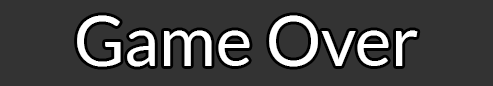
<style>
.page{position:relative;width:493px;height:86px;background:#333333}
.page>*{position:absolute;margin:0}
.t1{font:69.1px "Lato-Regular";color:#ffffff}
</style>
<div class="page">
<p class="t1" style="left:77px;top:15px;width:341px;height:52px">Game Over</p>
</div>
